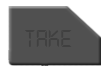
<style>
.page{position:relative;width:110px;height:72px;background:#505050}
.page>*{position:absolute;margin:0}
.t1{font:26px "DS-Digital";letter-spacing:-0.025em;color:#404040}
</style>
<div class="page">
<p class="t1" style="left:25px;top:29px;width:47px;height:19px">take</p>
</div>
